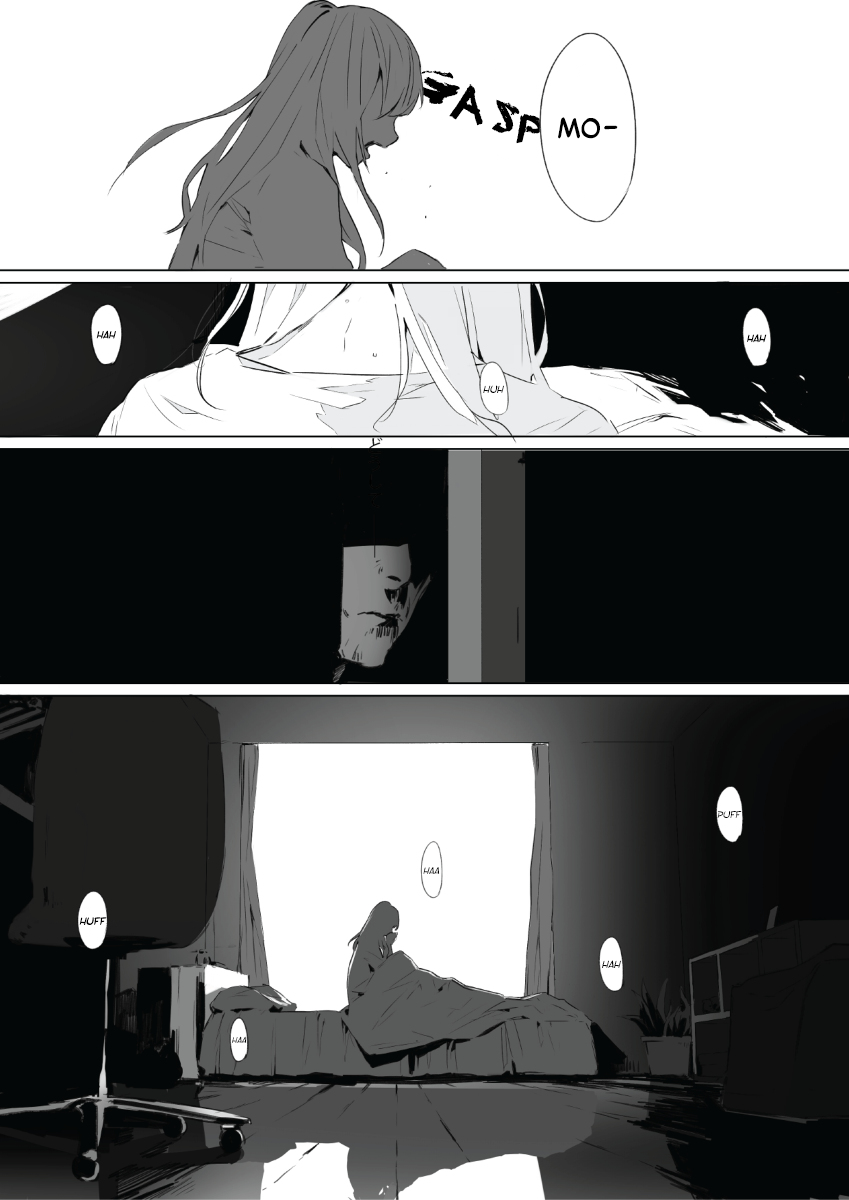
<style>
.page{position:relative;width:849px;height:1200px;background:#ffffff}
.page>*{position:absolute;margin:0}
.t1{font:45.4px "DJ-Gross";color:#000000}
.t2{font:30px "SFToontime";color:#000000}
.t3{font:11px "SFToontime";color:#000000;font-style:italic}
.t4{font:10px "SFToontime";letter-spacing:-0.01em;color:#000000;font-style:italic}
.t5{font:9px "SFToontime";letter-spacing:-0.01em;color:#000000;font-style:italic}
</style>
<div class="page">
<p class="t1" style="left:410px;top:70px;width:136px;height:74px;rotate:27deg">Gasp</p>
<p class="t2" style="left:558px;top:117px;width:60px;height:22px">Mo—</p>
<p class="t3" style="left:96px;top:330px;width:20px;height:9px">hah</p>
<p class="t3" style="left:747px;top:334px;width:20px;height:9px">hah</p>
<p class="t3" style="left:483px;top:385px;width:21px;height:8px">huh</p>
<p class="t4" style="left:717px;top:811px;width:25px;height:7px">puff</p>
<p class="t4" style="left:423px;top:867px;width:17px;height:7px">Haa</p>
<p class="t3" style="left:79px;top:917px;width:28px;height:8px">huff</p>
<p class="t3" style="left:602px;top:960px;width:19px;height:8px">HAh</p>
<p class="t5" style="left:232px;top:1036px;width:15px;height:7px">haa</p>
</div>
